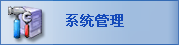
<style>
.page{position:relative;width:179px;height:45px}
.page>*{position:absolute;margin:0}
.t1{font:14px "SimSun";color:#144aba;font-weight:bold}
</style>
<div class="page">
<p class="t1" style="left:66px;top:14px;width:58px;height:13px">系统管理</p>
</div>
